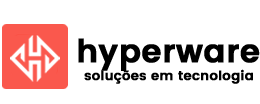
<style>
.page{position:relative;width:260px;height:104px;background:#ffffff}
.page>*{position:absolute;margin:0}
.t1{font:31.8px "Poppins-SemiBold";color:#000000;font-weight:bold}
.t2{font:13.1px "Poppins-SemiBold";color:#000000;font-weight:bold}
</style>
<div class="page">
<p class="t1" style="left:78px;top:38px;width:182px;height:33px">hyperware</p>
<p class="t2" style="left:84px;top:69px;width:169px;height:15px">soluções em tecnologia</p>
</div>
